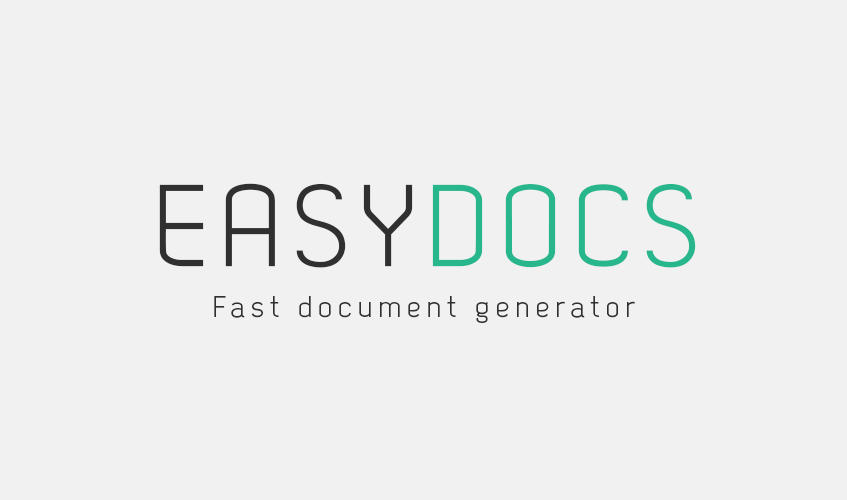
<style>
.page{position:relative;width:847px;height:500px;background:#f1f1f1}
.page>*{position:absolute;margin:0}
.t1{font:115.5px "Dekar";letter-spacing:0.075em;color:#303030;text-transform:uppercase;font-weight:bold}
.t2{font:115.5px "Dekar";letter-spacing:0.075em;color:#28b78d;text-transform:uppercase;font-weight:bold}
.t3{font:30px "Dekar";letter-spacing:0.2em;color:#303030}
</style>
<div class="page">
<p class="t1" style="left:159px;top:183px;width:537px;height:85px">easy<span class="t2">docs</span></p>
<p class="t3" style="left:214px;top:296px;width:421px;height:27px">Fast document generator</p>
</div>
